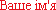
<style>
.page{position:relative;width:56px;height:10px;background:#ffffff}
.page>*{position:absolute;margin:0}
.t1{font:14px "TimesNewRomanPSMT";color:#e70e19}
</style>
<div class="page">
<p class="t1" style="left:0px;top:0px;width:56px;height:10px">Ваше ім'я</p>
</div>
